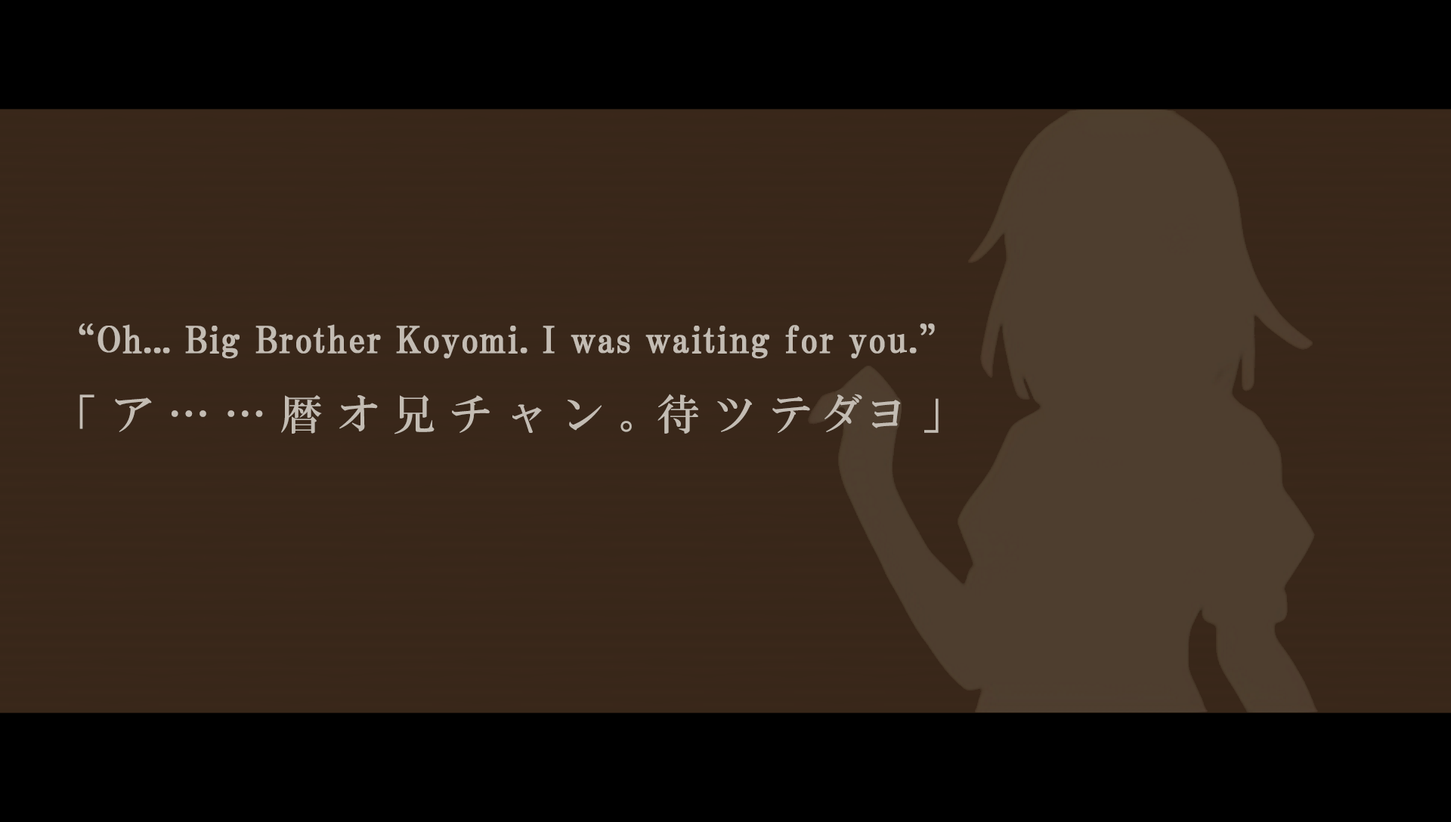
<style>
.page{position:relative;width:1451px;height:822px;background:#000000}
.page>*{position:absolute;margin:0}
.t1{font:36.3px "HGPMinchoB";letter-spacing:0.01em;color:#c3bcb3;font-weight:bold}
.t2{font:42.3px "HGMinchoB";letter-spacing:0.33em;color:#c3bcb3}
.t3{font:42.3px "HGMinchoB";letter-spacing:-0.07em;color:#c3bcb3}
.t4{font:42.3px "HGMinchoB";letter-spacing:0.19em;color:#c3bcb3}
.t5{font:42.3px "HGMinchoB";letter-spacing:0.05em;color:#c3bcb3}
</style>
<div class="page">
<p class="t1" style="left:79px;top:323px;width:856px;height:36px">“Oh... Big Brother Koyomi. I was waiting for you.”</p>
<p class="t2" style="left:79px;top:394px;width:859px;height:40px">「ア……暦オ兄チャン<span class="t3">。</span>待ツ<span class="t4">テ</span><span class="t5">ダ</span>ヨ」</p>
</div>
